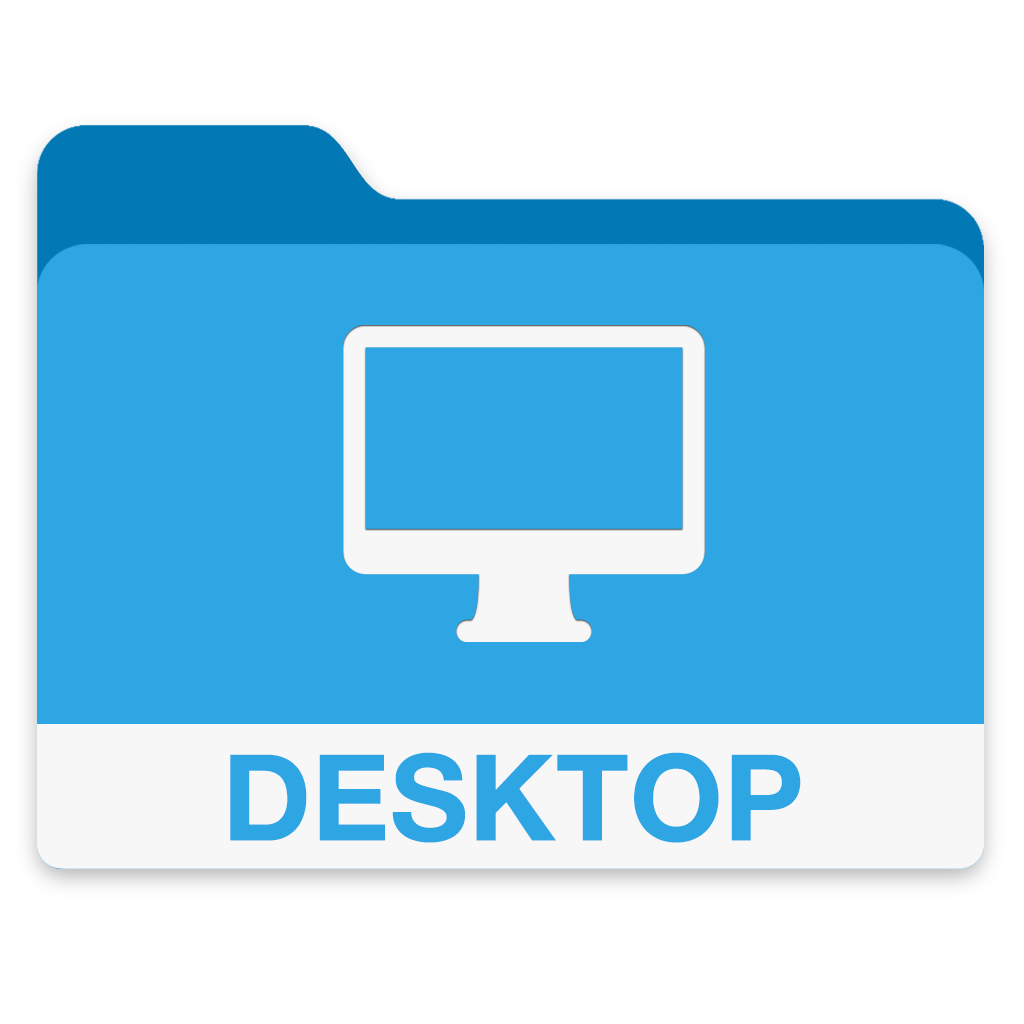
<style>
.page{position:relative;width:1024px;height:1024px;background:#2ea6e4}
.page>*{position:absolute;margin:0}
.t1{font:120px "HelveticaNeue-Bold";letter-spacing:0.005em;color:#2ea6e4}
</style>
<div class="page">
<p class="t1" style="left:230px;top:752px;width:571px;height:91px">DESKTOP</p>
</div>
